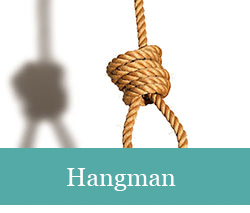
<style>
.page{position:relative;width:250px;height:213px;background:#ffffff}
.page>*{position:absolute;margin:0}
.t1{font:25px "Georgia";color:#ffffff}
</style>
<div class="page">
<p class="t1" style="left:67px;top:168px;width:109px;height:23px">Hangman</p>
</div>
